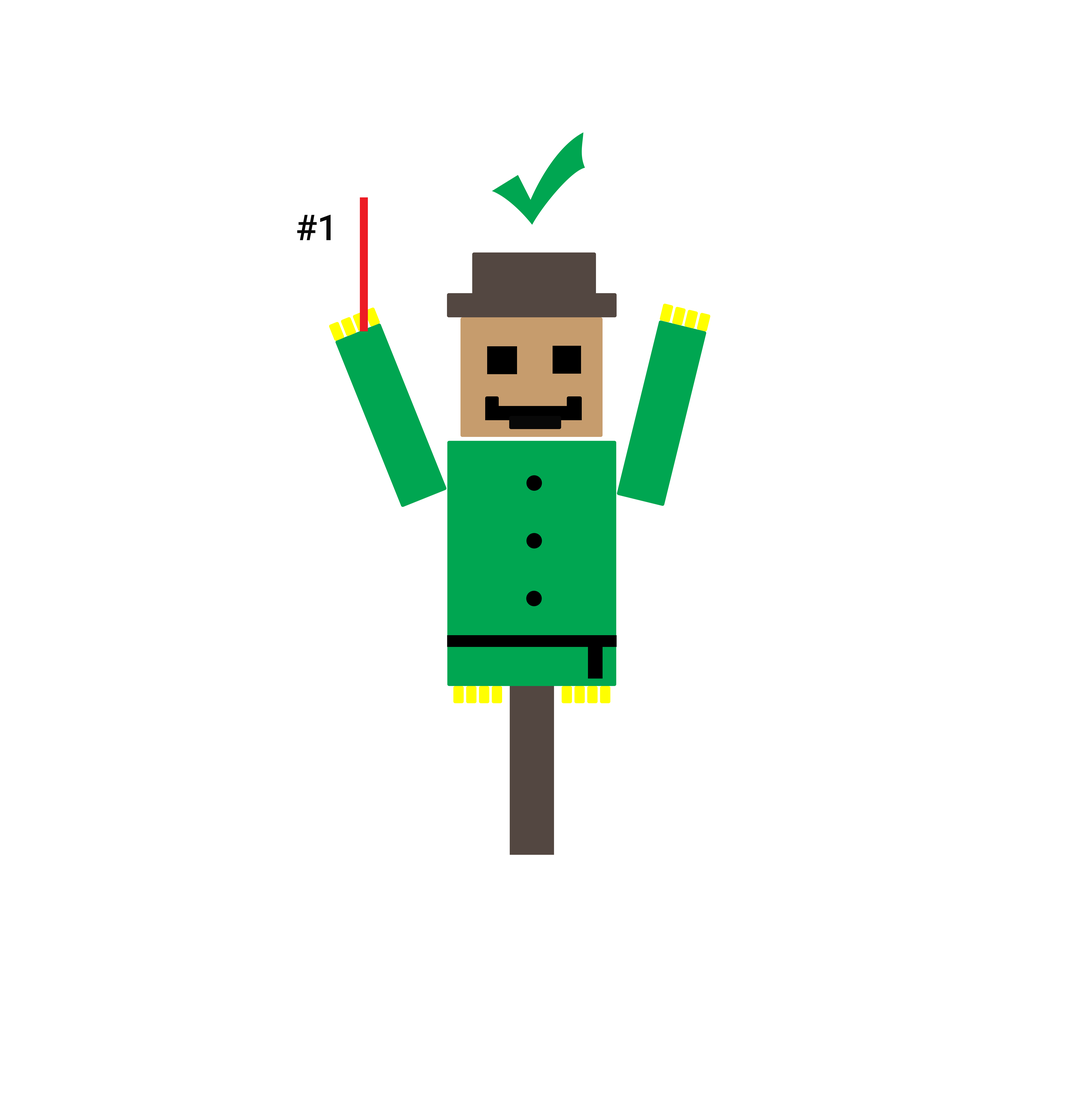
<style>
.page{position:relative;width:1081px;height:1103px;background:#ffffff}
.page>*{position:absolute;margin:0}
.t1{font:35.5px "Roboto-Medium";color:#080808}
</style>
<div class="page">
<p class="t1" style="left:297px;top:215px;width:34px;height:25px">#1</p>
</div>
